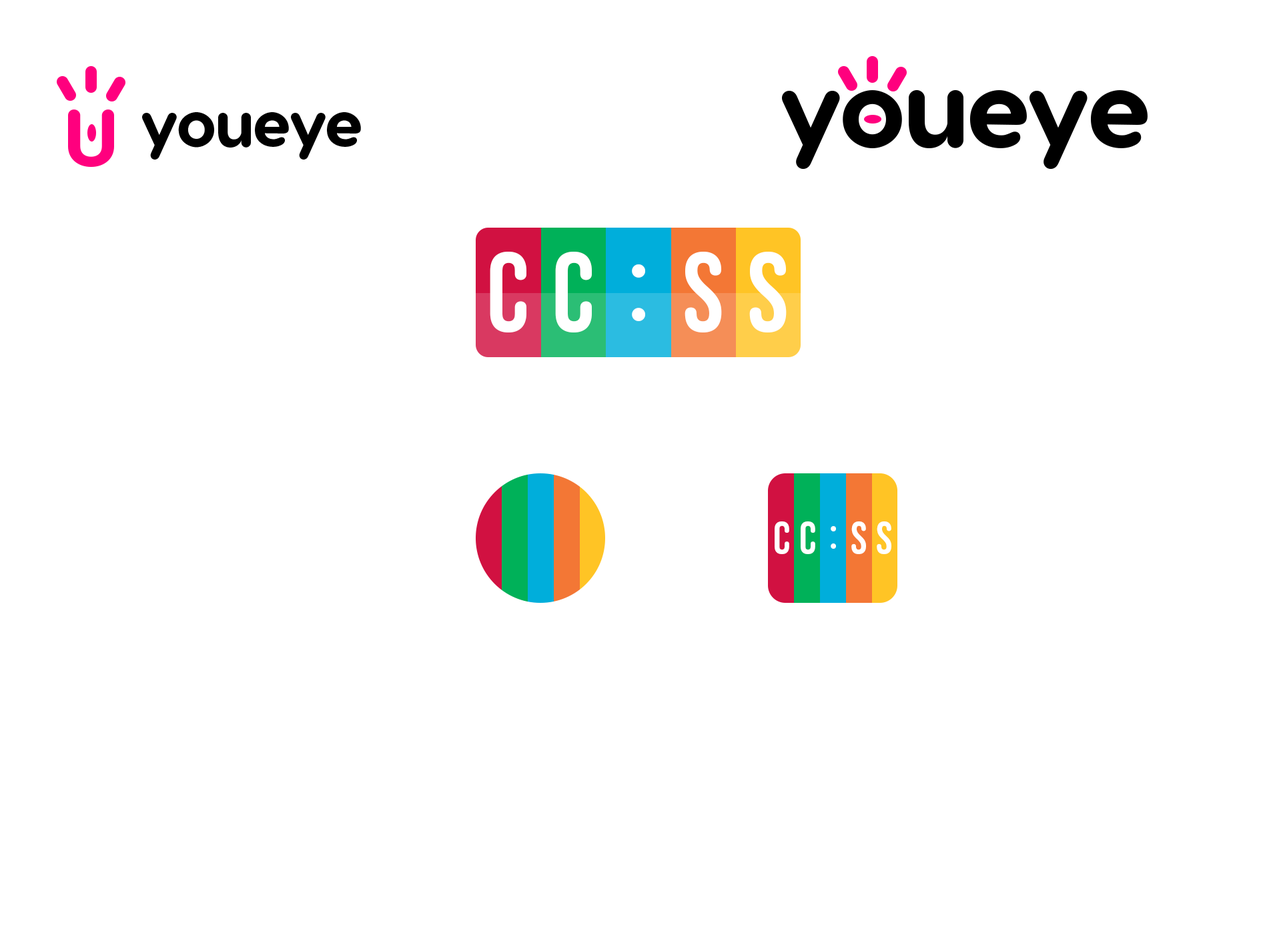
<style>
.page{position:relative;width:1261px;height:946px;background:#ffffff}
.page>*{position:absolute;margin:0}
.t1{font:109.5px "VisbyRoundCF-ExtraBold";letter-spacing:-0.04em;color:#000000}
.t2{font:81.4px "VisbyRoundCF-ExtraBold";letter-spacing:-0.04em;color:#ff007e}
.t3{font:65.5px "VisbyRoundCF-ExtraBold";letter-spacing:-0.04em;color:#000000}
.t4{font:111.4px "BebasNeueRounded-Regular";color:#ffffff}
.t5{font:114px "BebasNeueRounded-Regular";color:#ffffff}
.t6{font:44.8px "BebasNeueRounded-Regular";color:#ffffff}
.t7{font:45.8px "BebasNeueRounded-Regular";color:#ffffff}
</style>
<div class="page">
<p class="t1" style="left:782px;top:90px;width:366px;height:79px">youeye</p>
<p class="t2" style="left:68px;top:109px;width:46px;height:58px">U</p>
<p class="t3" style="left:142px;top:112px;width:219px;height:47px">youeye</p>
<p class="t4" style="left:490px;top:252px;width:36px;height:81px">C</p>
<p class="t4" style="left:555px;top:252px;width:37px;height:81px">C</p>
<p class="t4" style="left:685px;top:252px;width:37px;height:81px">S</p>
<p class="t4" style="left:749px;top:252px;width:38px;height:81px">S</p>
<p class="t5" style="left:632px;top:264px;width:13px;height:57px">:</p>
<p class="t6" style="left:775px;top:521px;width:14px;height:33px">C</p>
<p class="t6" style="left:801px;top:521px;width:14px;height:33px">C</p>
<p class="t6" style="left:851px;top:521px;width:15px;height:33px">S</p>
<p class="t6" style="left:877px;top:521px;width:14px;height:33px">S</p>
<p class="t7" style="left:831px;top:526px;width:5px;height:22px">:</p>
</div>
